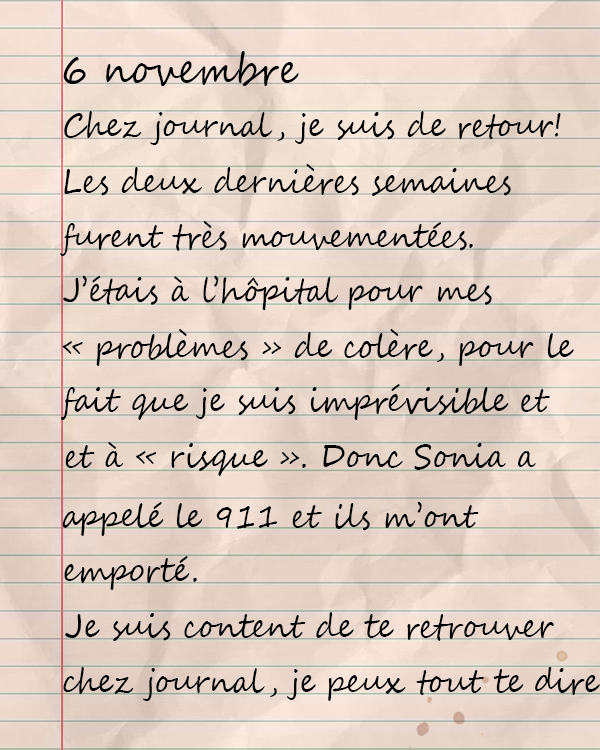
<style>
.page{position:relative;width:600px;height:750px}
.page>*{position:absolute;margin:0}
.t1{font:41.8px "SegoeScript";color:#000000;scale:0.9 1}
.t2{font:33.3px "SegoeScript";color:#000000;scale:0.9 1}
</style>
<div class="page">
<p class="t1" style="left:63px;top:51px;width:236px;height:35px">6 novembre</p>
<p class="t2" style="left:64px;top:111px;width:497px;height:34px">Chez journal, je suis de retour!</p>
<p class="t2" style="left:64px;top:164px;width:447px;height:32px">Les deux dernières semaines</p>
<p class="t2" style="left:60px;top:221px;width:413px;height:35px">furent très mouvementées.</p>
<p class="t2" style="left:63px;top:275px;width:429px;height:36px">J’étais à l’hôpital pour mes</p>
<p class="t2" style="left:62px;top:329px;width:512px;height:37px">« problèmes » de colère, pour le</p>
<p class="t2" style="left:61px;top:384px;width:489px;height:36px">fait que je suis imprévisible et</p>
<p class="t2" style="left:65px;top:442px;width:471px;height:34px">et à « risque ». Donc Sonia a</p>
<p class="t2" style="left:62px;top:501px;width:417px;height:35px">appelé le 911 et ils m’ont</p>
<p class="t2" style="left:64px;top:556px;width:133px;height:34px">emporté.</p>
<p class="t2" style="left:65px;top:612px;width:489px;height:29px">Je suis content de te retrouver</p>
<p class="t2" style="left:63px;top:667px;width:537px;height:34px">chez journal, je peux tout te dire</p>
</div>
